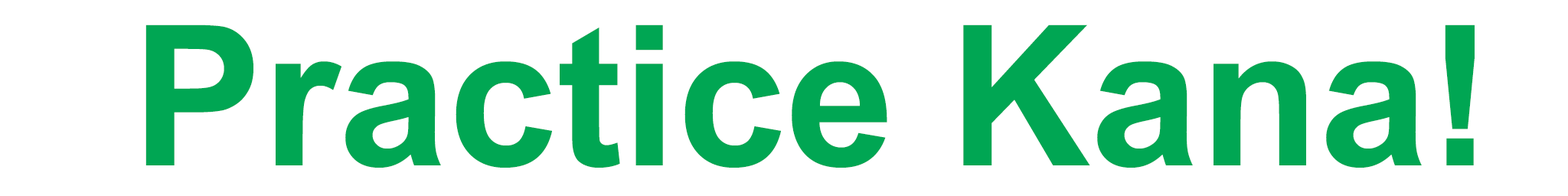
<style>
.page{position:relative;width:1568px;height:196px;background:#ffffff}
.page>*{position:absolute;margin:0}
.t1{font:196px "Arial-BoldMT";color:#00a653}
</style>
<div class="page">
<p class="t1" style="left:145px;top:24px;width:1330px;height:144px">Practice Kana!</p>
</div>
